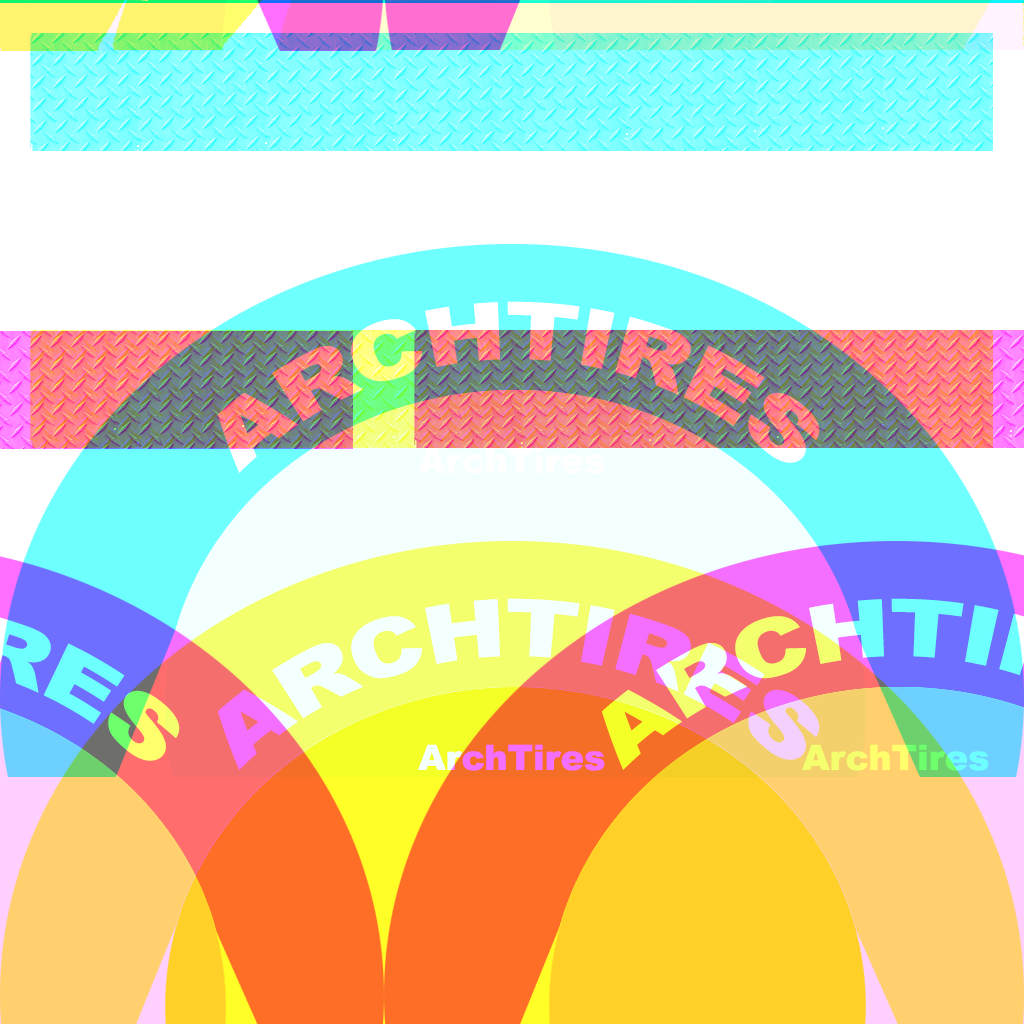
<style>
.page{position:relative;width:1024px;height:1024px}
.page>*{position:absolute;margin:0}
.t1{font:80px "Arial-Black"}
.t2{font:35px "Arial-Black";color:#ffffff}
</style>
<div class="page">
<p class="t1" style="left:218px;top:298px;width:602px;height:172px;text-align:center">ARCHTIRES</p>
<p class="t2" style="left:418px;top:444px;width:187px;height:27px">ArchTires</p>
</div>
